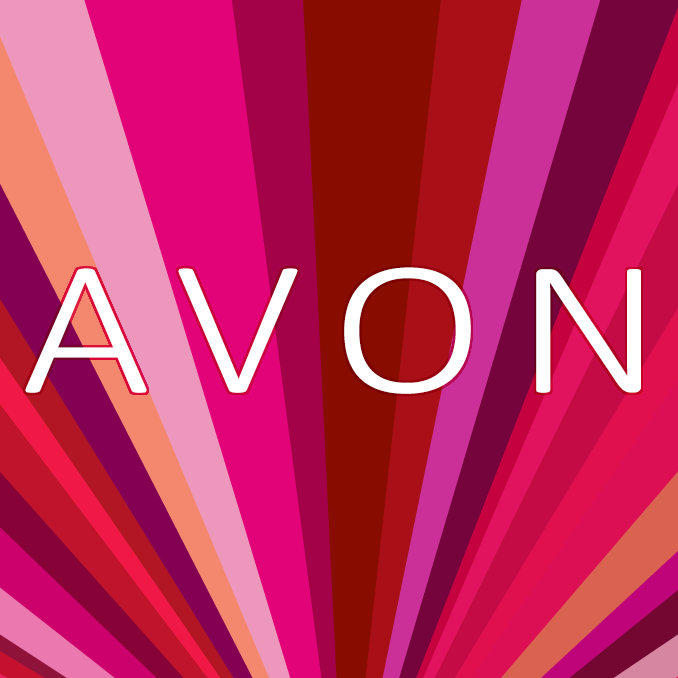
<style>
.page{position:relative;width:678px;height:678px}
.page>*{position:absolute;margin:0}
.t1{font:194.3px "Calibri-Light";letter-spacing:0.14em;color:#ffffff;scale:1.19 1}
</style>
<div class="page">
<p class="t1" style="left:25px;top:267px;width:616px;height:127px">AVON</p>
</div>
